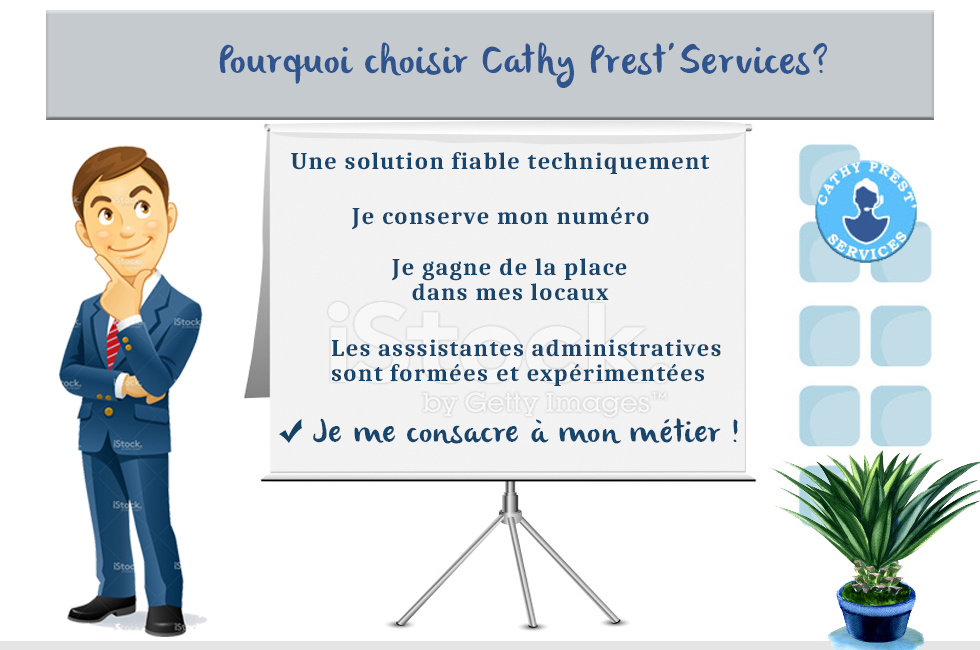
<style>
.page{position:relative;width:980px;height:650px;background:#ffffff}
.page>*{position:absolute;margin:0}
.t1{font:40px "olivier";letter-spacing:0.05em;color:#30548e;scale:0.96 1}
.t2{font:24px "Caladea-Bold";letter-spacing:0.05em;color:#18456b}
.t3{font:24px/25px "Caladea-Bold";letter-spacing:0.05em;color:#18456b}
.t4{font:32px "olivier";letter-spacing:0.05em;color:#18456b}
</style>
<div class="page">
<p class="t1" style="left:219px;top:42px;width:609px;height:46px">Pourquoi choisir Cathy Prest’Services?</p>
<p class="t2" style="left:291px;top:152px;width:419px;height:22px">Une solution fiable techniquement</p>
<p class="t2" style="left:352px;top:207px;width:297px;height:23px">Je conserve mon numéro</p>
<p class="t3" style="left:392px;top:258px;width:235px;height:43px">Je gagne de la place <br>   dans mes locaux</p>
<p class="t3" style="left:332px;top:339px;width:389px;height:43px">Les asssistantes administratives <br>sont formées</p>
<p class="t2" style="left:497px;top:364px;width:207px;height:22px">et expérimentées</p>
<p class="t4" style="left:313px;top:418px;width:425px;height:26px">Je me consacre à mon métier !</p>
</div>
